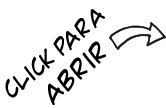
<style>
.page{position:relative;width:166px;height:108px;background:#ffffff}
.page>*{position:absolute;margin:0}
.t1{font:24.2px "ComicGeek";color:#000000}
.t2{font:27.1px "ComicGeek";letter-spacing:0.005em;color:#000000}
</style>
<div class="page">
<p class="t1" style="left:5px;top:9px;width:100px;height:89px;rotate:-41deg">click para</p>
<p class="t2" style="left:48px;top:41px;width:59px;height:64px;rotate:-42deg">abrir</p>
</div>
